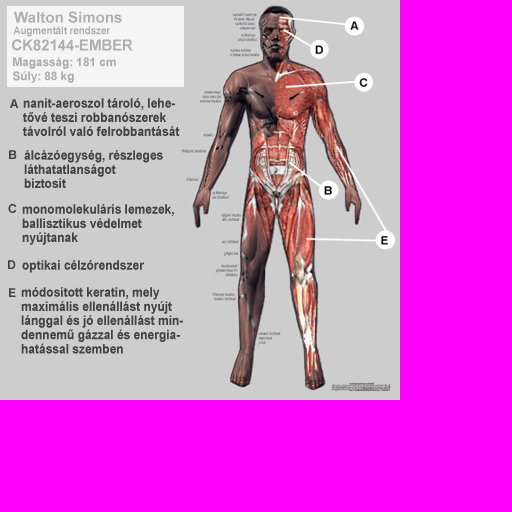
<style>
.page{position:relative;width:512px;height:512px;background:#ff00ff}
.page>*{position:absolute;margin:0}
.t1{font:10.7px "Arial-BoldMT";letter-spacing:-0.005em;color:#adadad;scale:0.92 1}
.t2{font:15.3px "Arial-BoldMT";letter-spacing:-0.005em;color:#adadad}
.t3{font:12.1px "Arial-BoldMT";letter-spacing:-0.005em;color:#adadad}
.t4{font:13.2px/14.2px "Arial-BoldMT";letter-spacing:-0.005em;color:#424242;scale:0.92 1}
.t5{font:13.2px "Arial-BoldMT";letter-spacing:-0.005em;color:#424242;scale:0.92 1}
</style>
<div class="page">
<p class="t1" style="left:13px;top:26px;width:97px;height:11px">Augmentált rendszer</p>
<p class="t2" style="left:12px;top:39px;width:121px;height:12px">CK82144-EMBER</p>
<p class="t3" style="left:13px;top:57px;width:103px;height:12px">Magasság: 181 cm</p>
<p class="t3" style="left:13px;top:71px;width:61px;height:12px">Súly: 88 kg</p>
<p class="t4" style="left:23px;top:98px;width:157px;height:38px">nanit-aeroszol tároló, lehe-<br>tővé teszi robbanószerek<br>távolról való felrobbantását</p>
<p class="t4" style="left:24px;top:150px;width:139px;height:38px">álcázóegység, részleges<br>láthatatlanságot<br>biztosít</p>
<p class="t4" style="left:22px;top:204px;width:152px;height:41px">monomolekuláris lemezek,<br>ballisztikus védelmet<br>nyújtanak</p>
<p class="t5" style="left:22px;top:260px;width:123px;height:13px">optikai célzórendszer</p>
<p class="t4" style="left:21px;top:287px;width:162px;height:67px">módosított keratin, mely<br>maximális ellenállást nyújt<br>lánggal és jó ellenállást min-<br>dennemű gázzal és energia-<br>hatással szemben</p>
</div>
